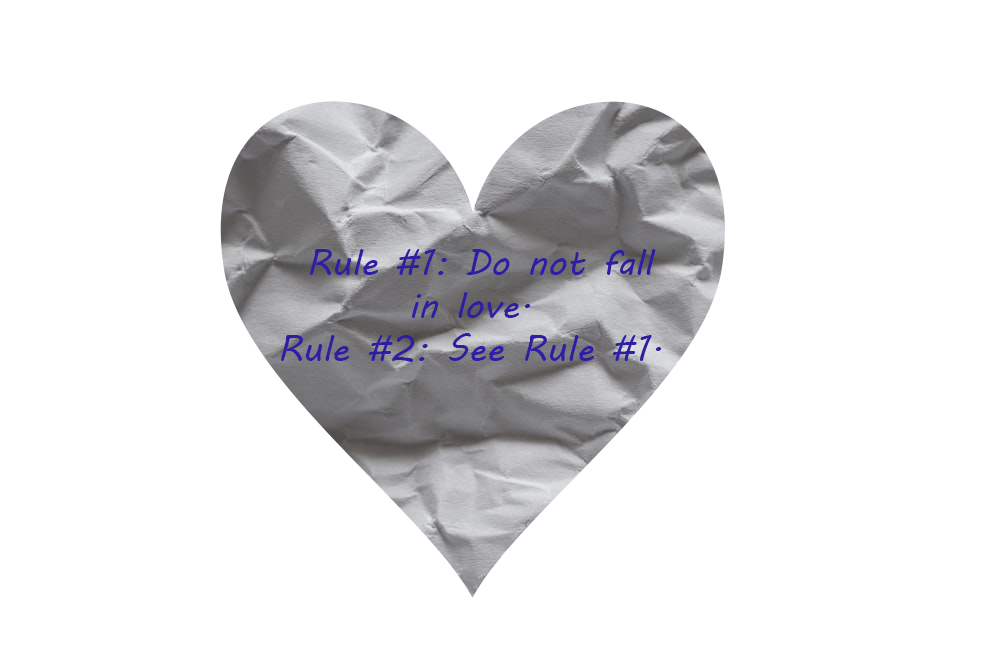
<style>
.page{position:relative;width:1000px;height:667px;background:#ffffff}
.page>*{position:absolute;margin:0}
.t1{font:36px "MVBoli";color:#2e1ea3}
</style>
<div class="page">
<p class="t1" style="left:281px;top:249px;width:381px;height:113px;text-align:center">Rule #1: Do not fall in love.<br>Rule #2: See Rule #1.</p>
</div>
